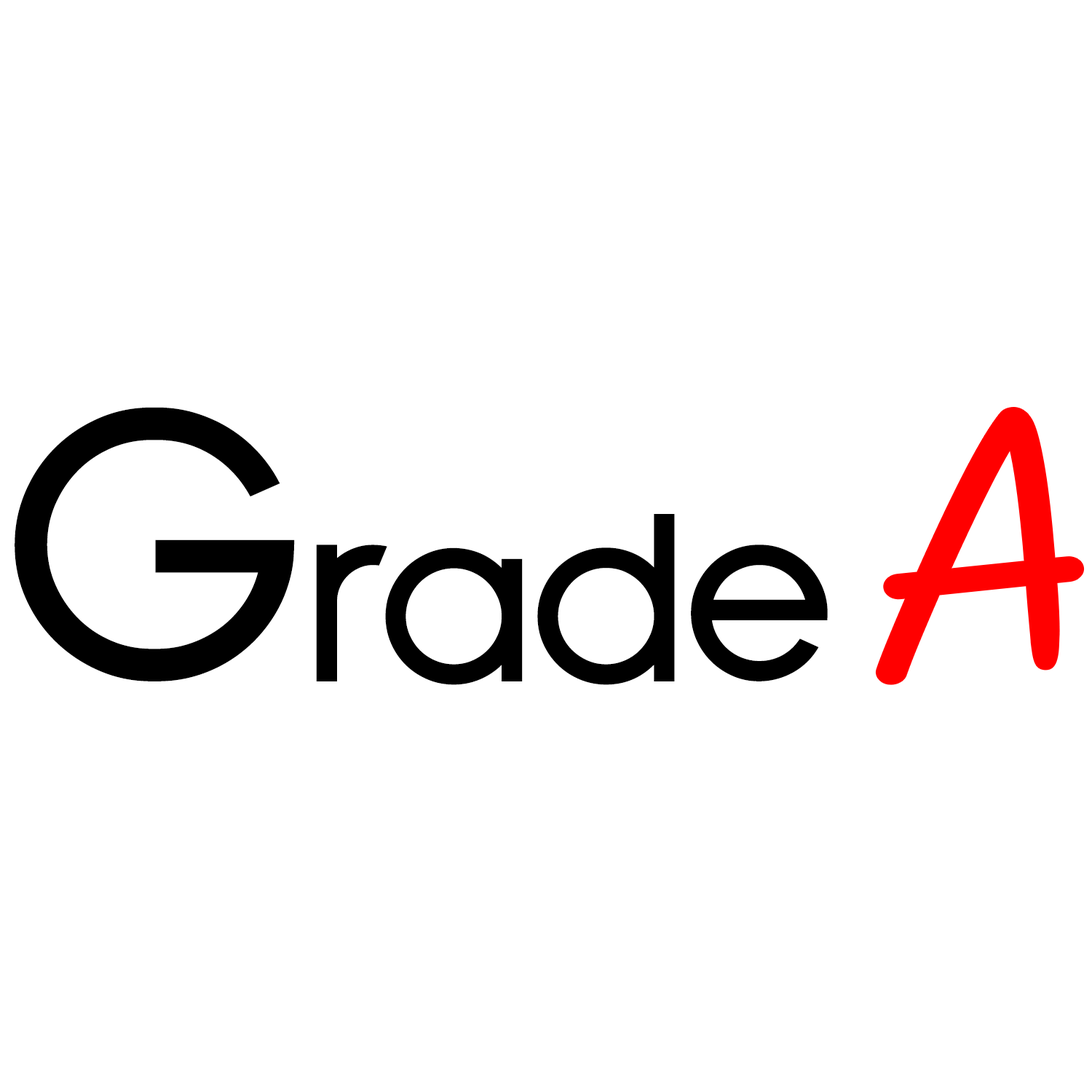
<style>
.page{position:relative;width:1092px;height:1092px;background:#ffffff}
.page>*{position:absolute;margin:0}
.t1{font:234.6px "Vilane-Extra-Light";color:#000000}
.t2{font:371.5px "Vilane-Extra-Light";color:#000000}
</style>
<div class="page">
<p class="t1" style="left:15px;top:407px;width:813px;height:278px"><span class="t2">G</span>rade</p>
</div>
